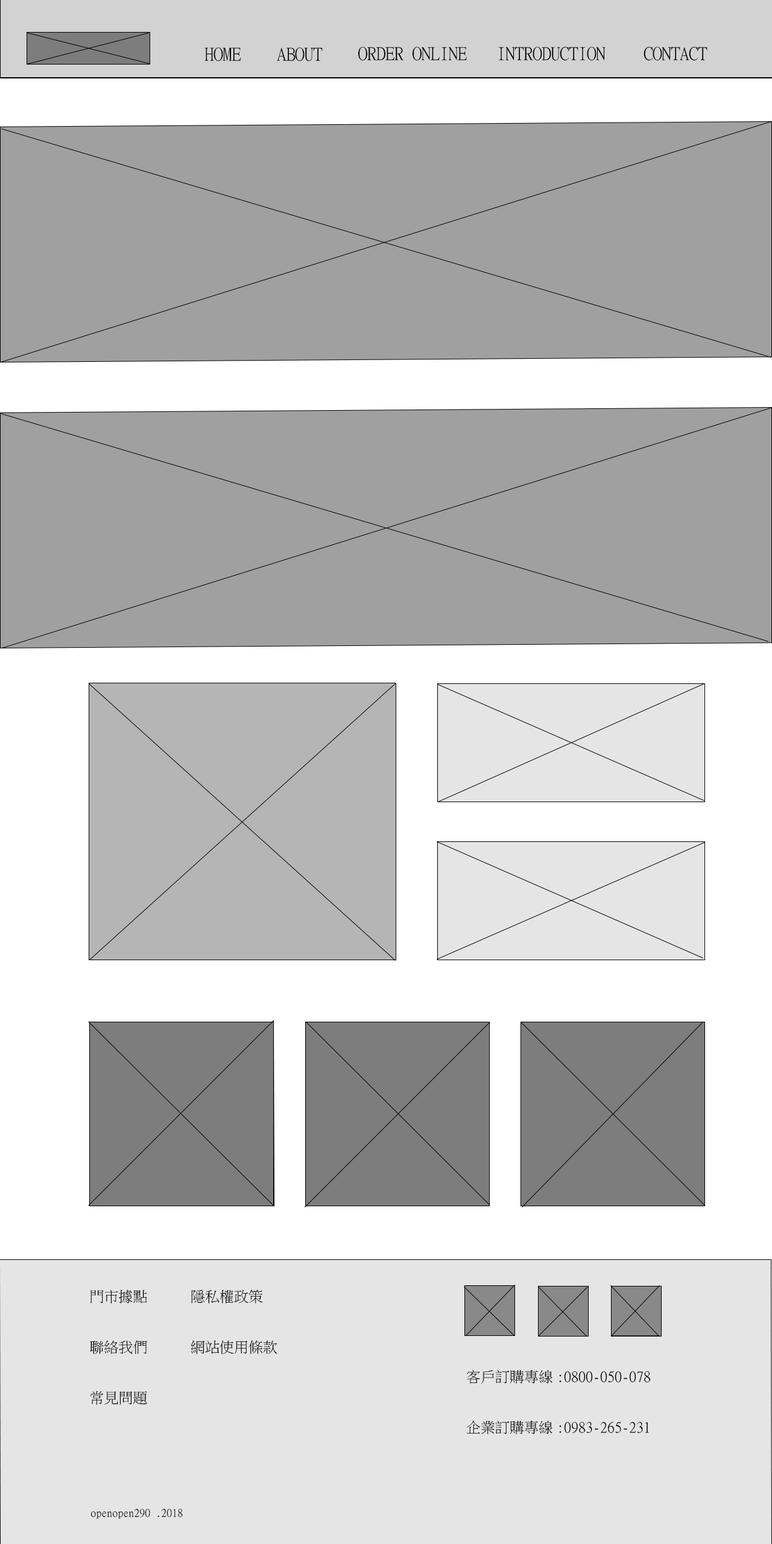
<style>
.page{position:relative;width:772px;height:1544px;background:#a0a0a0}
.page>*{position:absolute;margin:0}
.t1{font:18.1px "MingLiU";color:#000000}
.t2{font:14.5px "MingLiU";color:#000000}
.t3{font:10.9px "MingLiU";color:#000000}
</style>
<div class="page">
<p class="t1" style="left:204px;top:47px;width:37px;height:15px">HOME</p>
<p class="t1" style="left:277px;top:47px;width:46px;height:15px">ABOUT</p>
<p class="t1" style="left:358px;top:46px;width:109px;height:15px">ORDER ONLINE</p>
<p class="t1" style="left:498px;top:46px;width:108px;height:15px">INTRODUCTION</p>
<p class="t1" style="left:644px;top:46px;width:64px;height:15px">CONTACT</p>
<p class="t2" style="left:90px;top:1290px;width:58px;height:116px">門市據點<br><br>聯絡我們<br><br>常見問題</p>
<p class="t2" style="left:191px;top:1290px;width:86px;height:65px">隱私權政策<br><br>網站使用條款</p>
<p class="t2" style="left:466px;top:1370px;width:185px;height:65px">客戶訂購專線:0800-050-078<br><br>企業訂購專線:0983-265-231</p>
<p class="t3" style="left:90px;top:1509px;width:93px;height:10px">openopen290 .2018</p>
</div>
